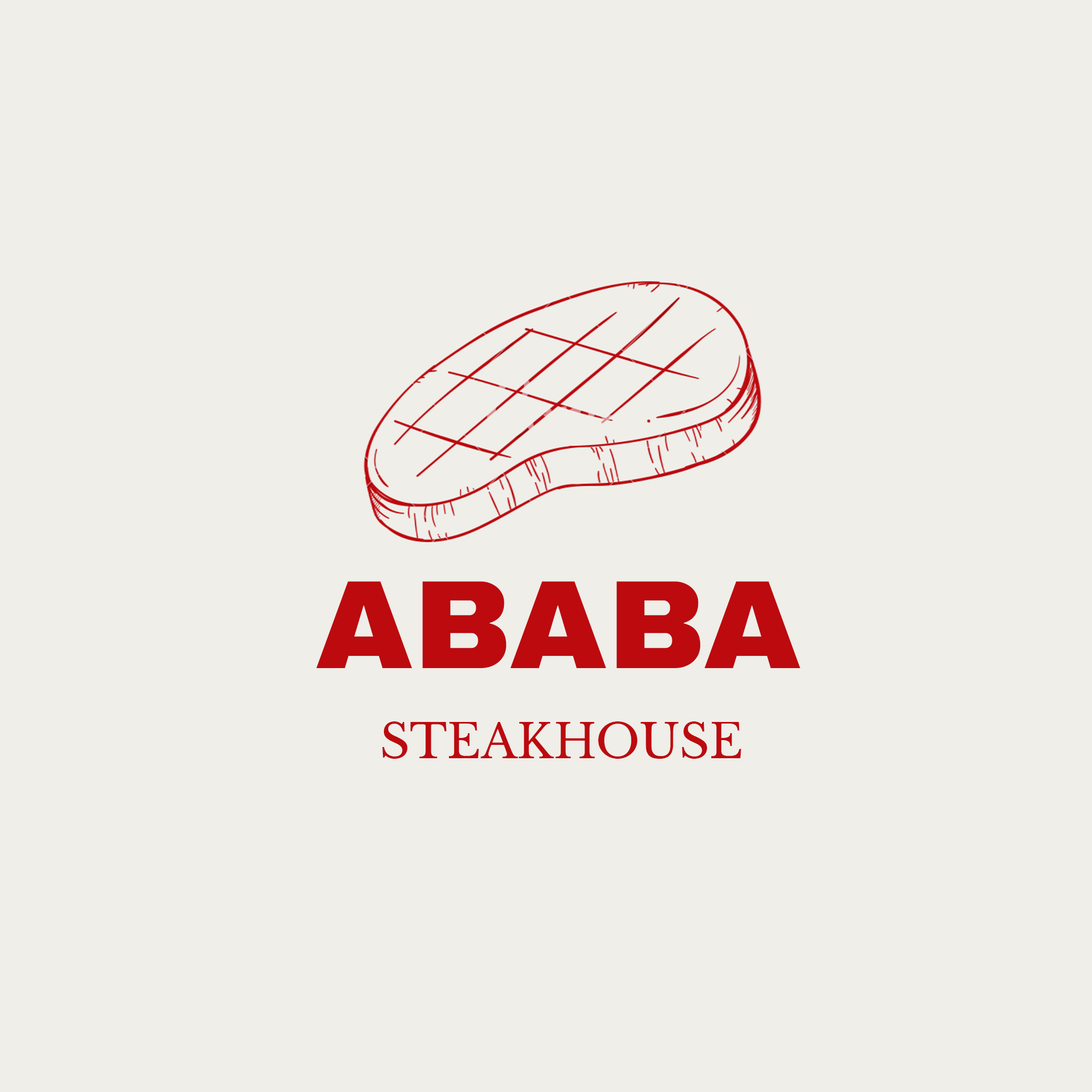
<style>
.page{position:relative;width:1092px;height:1092px;background:#efeee9}
.page>*{position:absolute;margin:0}
.t1{font:126px "ArchivoBlack-Regular";color:#bc0a0f}
.t2{font:46.7px "LibreBaskerville-Regular";color:#bc0a0f}
</style>
<div class="page">
<p class="t1" style="left:316px;top:581px;width:484px;height:87px">ABABA</p>
<p class="t2" style="left:382px;top:721px;width:359px;height:38px">STEAKHOUSE</p>
</div>
